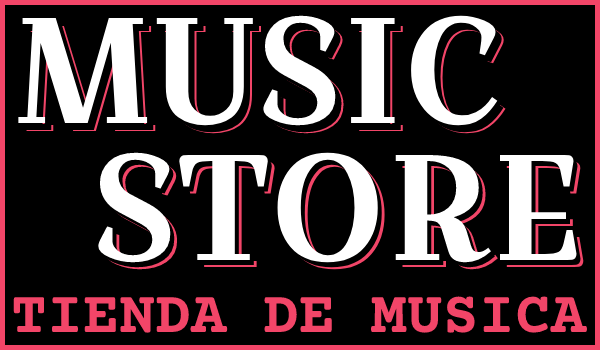
<style>
.page{position:relative;width:600px;height:350px;background:#000000}
.page>*{position:absolute;margin:0}
.t1{font:150px "CroissantOne-Regular";color:#ffffff}
.t2{font:150px "CroissantOne-Regular"}
.t3{font:60px "CourierPrime-Bold";color:#f24568}
</style>
<div class="page">
<p class="t1" style="left:18px;top:15px;width:480px;height:111px">MUSIC</p>
<p class="t2" style="left:24px;top:22px;width:480px;height:111px">MUSIC</p>
<p class="t2" style="left:26px;top:23px;width:480px;height:111px">MUSIC</p>
<p class="t1" style="left:98px;top:152px;width:479px;height:111px">STORE</p>
<p class="t1" style="left:102px;top:157px;width:479px;height:111px">STORE</p>
<p class="t2" style="left:105px;top:159px;width:479px;height:111px">STORE</p>
<p class="t3" style="left:13px;top:296px;width:574px;height:37px">TIENDA DE MUSICA</p>
</div>
